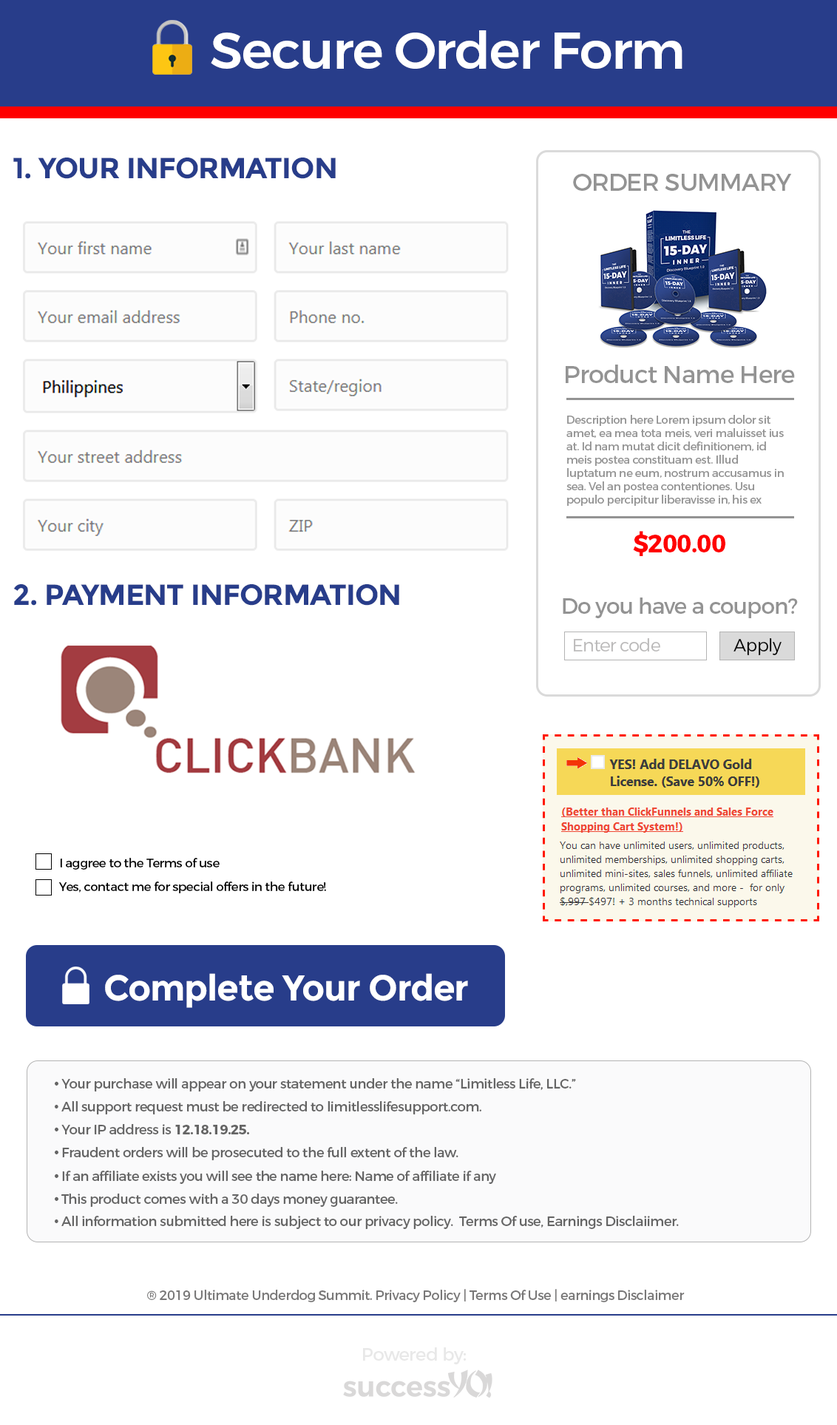
<style>
.page{position:relative;width:837px;height:1425px;background:#ffffff}
.page>*{position:absolute;margin:0}
.t1{font:52.1px "Montserrat-Medium";letter-spacing:-0.025em;color:#ffffff}
.t2{font:29px "Montserrat-Bold";letter-spacing:-0.025em;color:#283d8a}
.t3{font:24.5px "Montserrat-Regular";letter-spacing:-0.025em;color:#939393}
.t4{font:11.1px "Montserrat-Regular";letter-spacing:-0.025em;color:#939393}
.t5{font:24.5px "Montserrat-Bold";letter-spacing:-0.025em;color:#ff0000}
.t6{font:21.7px "Montserrat-Regular";letter-spacing:-0.025em;color:#939393}
.t7{font:17.3px "Montserrat-Light";letter-spacing:-0.025em;color:#bab9b9}
.t8{font:17.3px "Montserrat-Light";letter-spacing:-0.025em;color:#000000}
.t9{font:12.4px "Montserrat-Regular";letter-spacing:-0.025em;color:#000000}
.t10{font:36px "Montserrat-Bold";letter-spacing:-0.025em;color:#ffffff}
.t11{font:13.4px "Montserrat-Regular";letter-spacing:-0.025em;color:#656565}
.t12{font:19.3px "Montserrat-Regular";letter-spacing:-0.025em;color:#656565}
.t13{font:18.8px "Montserrat-Regular";letter-spacing:-0.025em;color:#656565}
.t14{font:13.4px "Montserrat-Bold";letter-spacing:-0.025em;color:#656565}
.t15{font:13.3px "Montserrat-Regular";letter-spacing:-0.025em;color:#797878}
.t16{font:18.1px "Montserrat-Regular";letter-spacing:-0.025em;color:#e8e8e8}
</style>
<div class="page">
<p class="t1" style="left:211px;top:30px;width:471px;height:39px">Secure Order Form</p>
<p class="t2" style="left:13px;top:157px;width:323px;height:22px">1. YOUR INFORMATION</p>
<p class="t3" style="left:573px;top:174px;width:219px;height:17px">ORDER SUMMARY</p>
<p class="t3" style="left:566px;top:365px;width:229px;height:18px">Product Name Here</p>
<p class="t4" style="left:566px;top:415px;width:218px;height:91px">Description here Lorem ipsum dolor sit amet, ea mea tota meis, veri maluisset ius at. Id nam mutat dicit definitionem, id meis postea constituam est. Illud luptatum ne eum, nostrum accusamus in sea. Vel an postea contentiones. Usu populo percipitur liberavisse in, his ex nobis elaboraret, habeo scripta antiopam an est. Mei ei appareat similique inciderint, id utinam veritus mel.</p>
<p class="t5" style="left:633px;top:531px;width:92px;height:25px">$200.00</p>
<p class="t2" style="left:13px;top:584px;width:386px;height:22px">2. PAYMENT INFORMATION</p>
<p class="t6" style="left:563px;top:597px;width:235px;height:21px">Do you have a coupon?</p>
<p class="t7" style="left:574px;top:638px;width:86px;height:13px">Enter code</p>
<p class="t8" style="left:733px;top:638px;width:48px;height:17px">Apply</p>
<p class="t9" style="left:60px;top:858px;width:160px;height:11px">I aggree to the Terms of use</p>
<p class="t9" style="left:58px;top:881px;width:268px;height:12px">Yes, contact me for special offers in the future!</p>
<p class="t10" style="left:105px;top:973px;width:363px;height:35px">Complete Your Order</p>
<p class="t11" style="left:55px;top:1078px;width:624px;height:151px"><span class="t12">•</span> Your purchase will appear on your statement under the name “Limitless Life, LLC.”<br><span class="t13">•</span> All support request must be redirected to limitlesslifesupport.com.<br><span class="t12">•</span> Your IP address is <span class="t14">12.18.19.25.<br></span><span class="t12">•</span> Fraudent orders will be prosecuted to the full extent of the law.<br><span class="t12">•</span> If an affiliate exists you will see the name here: Name of affiliate if any<br><span class="t12">•</span> This product comes with a 30 days money guarantee.<br><span class="t13">•</span> All information submitted here is subject to our privacy policy.  Terms Of use, Earnings Disclaiimer.</p>
<p class="t15" style="left:147px;top:1289px;width:538px;height:13px">® 2019 Ultimate Underdog Summit. Privacy Policy | Terms Of Use | earnings Disclaimer</p>
<p class="t16" style="left:363px;top:1347px;width:103px;height:17px">Powered by:</p>
</div>
